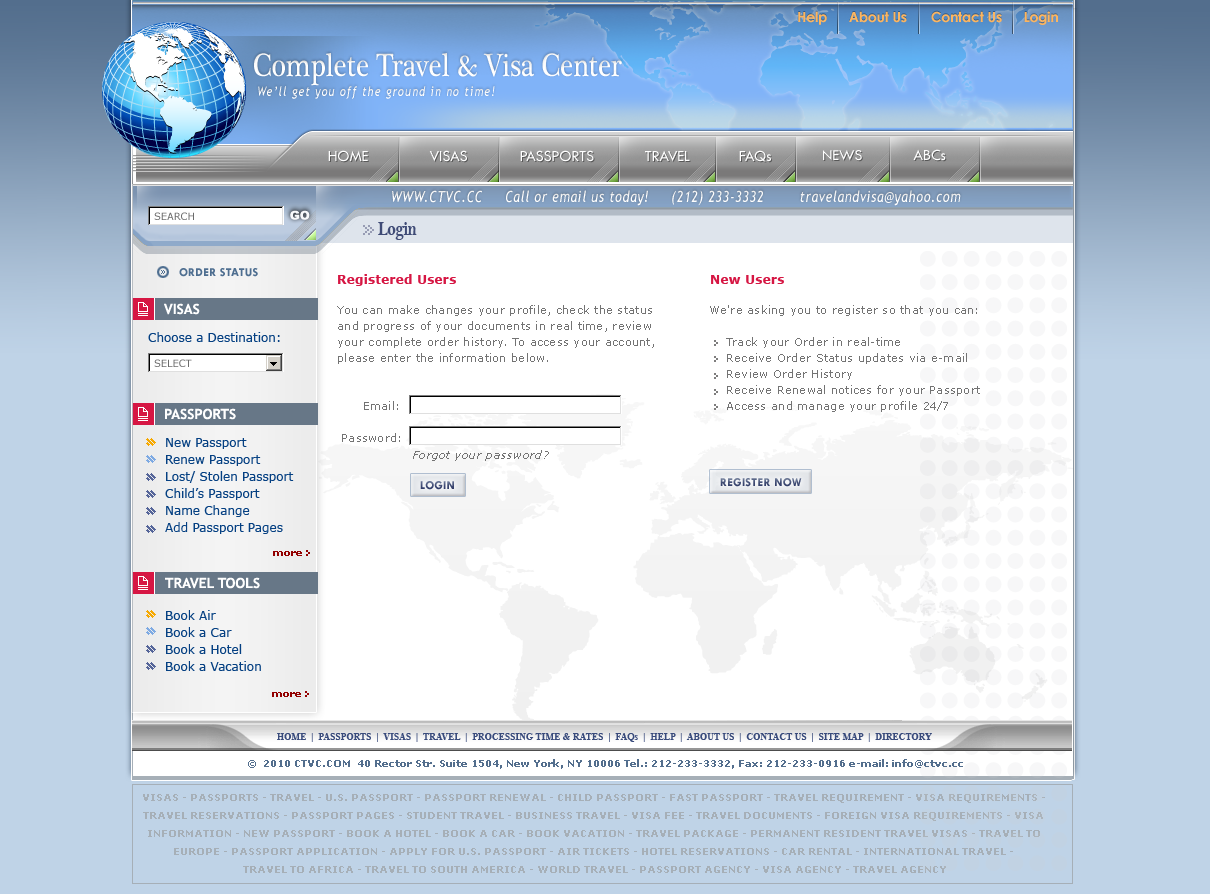
<style>
.page{position:relative;width:1210px;height:894px;background:#ffffff}
.page>*{position:absolute;margin:0}
.t1{font:14px "CenturyGothic-Bold";letter-spacing:-0.02em;color:#fbb561}
.t2{font:33px "PlantagenetCherokee";letter-spacing:0.001em;color:#ffffff;scale:0.82 1}
.t3{font:13.2px "TrebuchetMS-Italic";letter-spacing:0.1em;color:#ffffff;scale:0.82 1}
.t4{font:16px "TwCenMT-Regular";letter-spacing:-0.01em;color:#ffffff}
.t5{font:15.7px "TwCenMT-Regular";letter-spacing:-0.01em;color:#ffffff}
.t6{font:15.4px "TrebuchetMS-Italic";letter-spacing:0.05em;color:#ffffff;scale:0.82 1}
.t7{font:10px "Verdana";letter-spacing:-0.01em;color:#6b6b6b}
.t8{font:12px "Arial-Black";letter-spacing:-0.01em;color:#f8f9fb}
.t9{font:19.8px "BellMTBold";letter-spacing:-0.05em;color:#3f4b76;scale:0.82 1}
.t10{font:12px "TwCenMT-Bold";letter-spacing:0.02em;color:#4e6e90}
.t11{font:12px "Verdana-Bold";letter-spacing:0.025em;color:#d61643}
.t12{font:14px "TrebuchetMS-Bold";color:#ffffff}
.t13{font:11px/16px "Verdana";letter-spacing:0.025em;color:#737373}
.t14{font:12px "Verdana";color:#054082}
.t15{font:12px/22px "Verdana";color:#054082}
.t16{font:11px "Verdana-Italic";letter-spacing:0.025em;color:#737373}
.t17{font:12px "TwCenMT-Bold";letter-spacing:0.025em;color:#404c75}
.t18{font:12px "TwCenMT-Bold";letter-spacing:0.025em;color:#455177}
.t19{font:10px "Verdana-Bold";color:#930000}
.t20{font:10px "TimesNewRomanPS-BoldMT";letter-spacing:0.025em;color:#394b7c;scale:0.9 1}
.t21{font:10px "Verdana-Bold";color:#536e8d}
.t22{font:10px/18px "Verdana-Bold";color:#a6afb7}
</style>
<div class="page">
<p class="t1" style="left:798px;top:11px;width:260px;height:14px">Help      About Us       Contact Us      Login</p>
<p class="t2" style="left:254px;top:53px;width:368px;height:33px">Complete Travel &amp; Visa Center</p>
<p class="t3" style="left:258px;top:86px;width:237px;height:13px">We’ll get you off the ground in no time!</p>
<p class="t4" style="left:328px;top:150px;width:40px;height:12px">HOME</p>
<p class="t4" style="left:429px;top:150px;width:38px;height:12px">VISAS</p>
<p class="t4" style="left:520px;top:150px;width:74px;height:12px">PASSPORTS</p>
<p class="t4" style="left:645px;top:150px;width:45px;height:12px">TRAVEL</p>
<p class="t4" style="left:739px;top:150px;width:32px;height:12px">FAQs</p>
<p class="t5" style="left:823px;top:150px;width:39px;height:11px">NEWS</p>
<p class="t4" style="left:913px;top:149px;width:33px;height:12px">ABCs</p>
<p class="t6" style="left:392px;top:190px;width:569px;height:16px">WWW.CTVC.CC     Call or email us today!     (212) 233-3332        travelandvisa@yahoo.com</p>
<p class="t7" style="left:154px;top:212px;width:40px;height:8px">SEARCH</p>
<p class="t8" style="left:290px;top:210px;width:20px;height:10px">GO</p>
<p class="t9" style="left:378px;top:222px;width:39px;height:18px">Login</p>
<p class="t10" style="left:179px;top:268px;width:79px;height:9px">ORDER STATUS</p>
<p class="t11" style="left:338px;top:274px;width:118px;height:12px">Registered Users</p>
<p class="t11" style="left:711px;top:275px;width:73px;height:9px">New Users</p>
<p class="t12" style="left:164px;top:303px;width:36px;height:12px">VISAS</p>
<p class="t13" style="left:337px;top:305px;width:317px;height:137px">You can make changes your profile, check the status<br>and progress of your documents in real time, review <br>your complete order history. To access your account, <br>please enter the information below.<br><br><br>      Email:<br><br> Password:</p>
<p class="t13" style="left:710px;top:305px;width:270px;height:107px">We're asking you to register so that you can:<br><br>    Track your Order in real-time<br>    Receive Order Status updates via e-mail<br>    Review Order History<br>    Receive Renewal notices for your Passport<br>    Access and manage your profile 24/7</p>
<p class="t14" style="left:148px;top:332px;width:132px;height:10px">Choose a Destination:</p>
<p class="t7" style="left:154px;top:359px;width:38px;height:8px">SELECT</p>
<p class="t12" style="left:165px;top:408px;width:71px;height:12px">PASSPORTS</p>
<p class="t15" style="left:165px;top:438px;width:129px;height:96px">New Passport<br>Renew Passport<br>Lost/ Stolen Passport<br>Child’s Passport<br>Name Change<br>Add Passport Pages</p>
<p class="t16" style="left:413px;top:450px;width:136px;height:11px">Forgot your password?</p>
<p class="t17" style="left:420px;top:481px;width:34px;height:9px">LOGIN</p>
<p class="t18" style="left:720px;top:478px;width:82px;height:9px">REGISTER NOW</p>
<p class="t19" style="left:273px;top:551px;width:29px;height:5px">more</p>
<p class="t12" style="left:165px;top:577px;width:95px;height:12px">TRAVEL TOOLS</p>
<p class="t15" style="left:166px;top:610px;width:95px;height:61px">Book Air<br>Book a Car<br>Book a Hotel<br>Book a Vacation</p>
<p class="t19" style="left:272px;top:692px;width:29px;height:5px">more</p>
<p class="t20" style="left:277px;top:733px;width:655px;height:9px">HOME  |  PASSPORTS  |  VISAS  |  TRAVEL  |  PROCESSING TIME &amp; RATES  |  FAQs  |  HELP  |  ABOUT US  |  CONTACT US  |  SITE MAP  |  DIRECTORY</p>
<p class="t21" style="left:248px;top:759px;width:715px;height:10px">©  2010 CTVC.COM  40 Rector Str. Suite 1504, New York, NY 10006 Tel.: 212-233-3332, Fax: 212-233-0916 e-mail: info@ctvc.cc</p>
<p class="t22" style="left:143px;top:794px;width:902px;height:79px;text-align:center">VISAS - PASSPORTS - TRAVEL - U.S. PASSPORT - PASSPORT RENEWAL - CHILD PASSPORT - FAST PASSPORT - TRAVEL REQUIREMENT - VISA REQUIREMENTS - <br>TRAVEL RESERVATIONS - PASSPORT PAGES - STUDENT TRAVEL - BUSINESS TRAVEL - VISA FEE - TRAVEL DOCUMENTS - FOREIGN VISA REQUIREMENTS - VISA <br>INFORMATION - NEW PASSPORT - BOOK A HOTEL - BOOK A CAR - BOOK VACATION - TRAVEL PACKAGE - PERMANENT RESIDENT TRAVEL VISAS - TRAVEL TO <br>EUROPE - PASSPORT APPLICATION - APPLY FOR U.S. PASSPORT - AIR TICKETS - HOTEL RESERVATIONS - CAR RENTAL - INTERNATIONAL TRAVEL - <br>TRAVEL TO AFRICA - TRAVEL TO SOUTH AMERICA - WORLD TRAVEL - PASSPORT AGENCY - VISA AGENCY - TRAVEL AGENCY</p>
</div>
